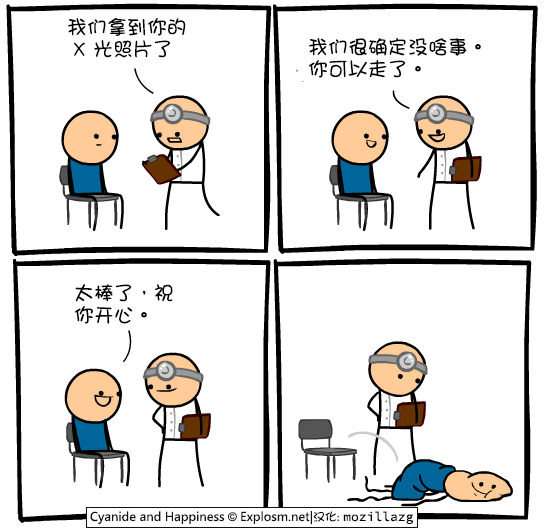
<style>
.page{position:relative;width:550px;height:530px;background:#ffffff}
.page>*{position:absolute;margin:0}
.t1{font:20px/22px "DFGirl";color:#000000}
</style>
<div class="page">
<p class="t1" style="left:67px;top:18px;width:119px;height:40px">我们拿到你的<br> X 光照片了</p>
<p class="t1" style="left:308px;top:38px;width:173px;height:40px">我们很确定没啥事。<br>你可以走了。</p>
<p class="t1" style="left:74px;top:284px;width:99px;height:40px">太棒了，祝<br>你开心。</p>
</div>
